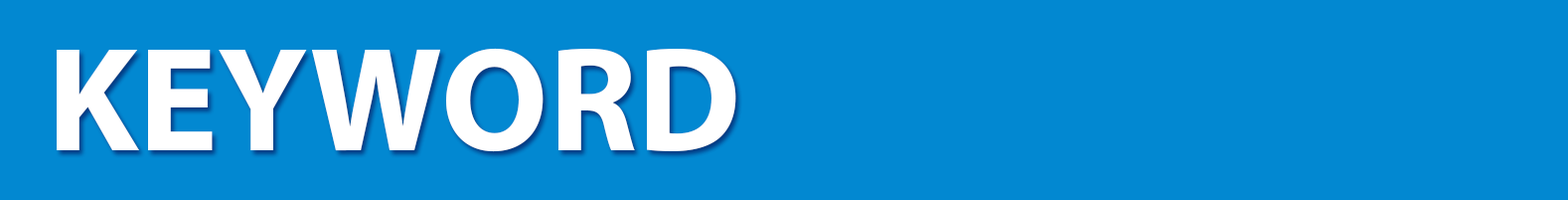
<style>
.page{position:relative;width:1568px;height:200px;background:#0288d1}
.page>*{position:absolute;margin:0}
.t1{font:149px "MyriadPro-Bold";color:#ffffff}
</style>
<div class="page">
<p class="t1" style="left:57px;top:48px;width:679px;height:104px">KEYWORD</p>
</div>
